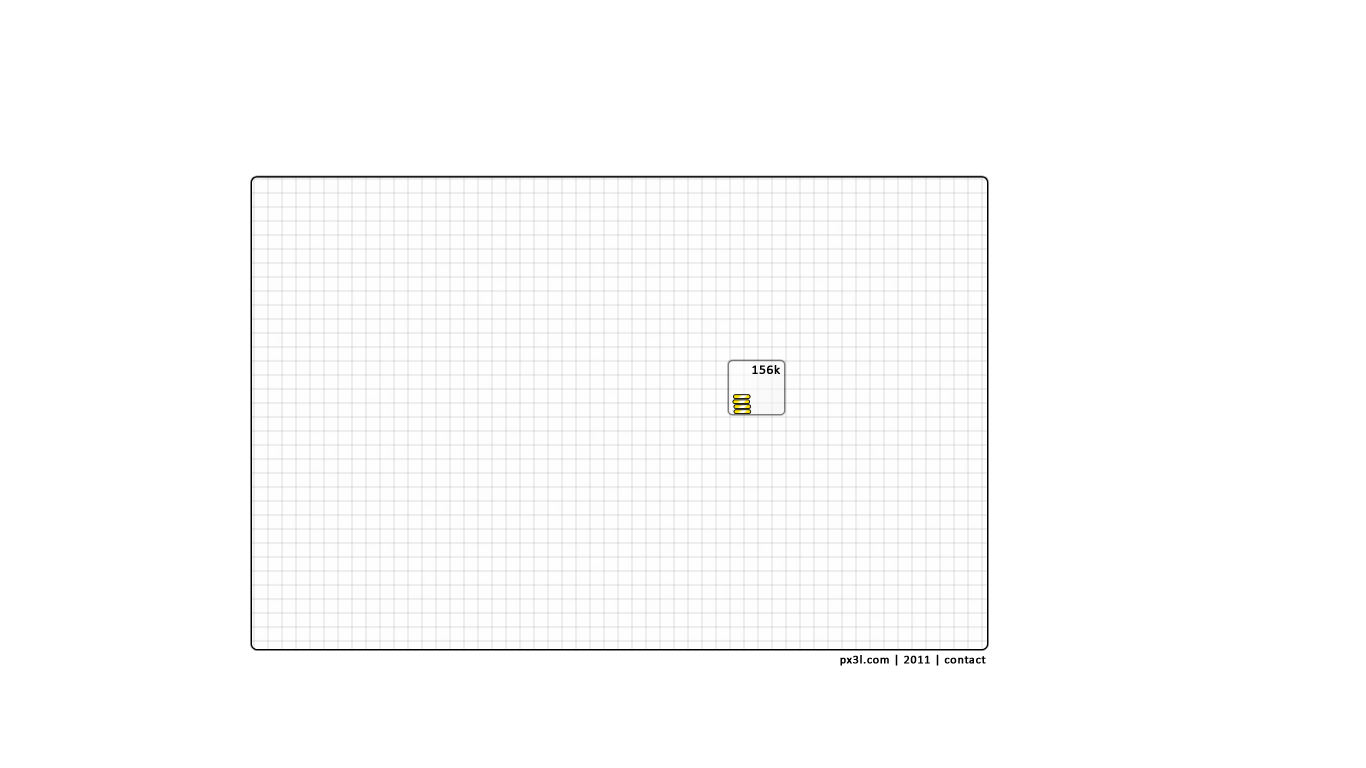
<style>
.page{position:relative;width:1366px;height:768px;background:#ffffff}
.page>*{position:absolute;margin:0}
.t1{font:13px "Calibri";letter-spacing:0.04em;color:#000000;font-weight:bold}
.t2{font:12px "Calibri";letter-spacing:0.04em;color:#000000;font-weight:bold}
</style>
<div class="page">
<p class="t1" style="left:752px;top:365px;width:28px;height:9px">156k</p>
<p class="t2" style="left:840px;top:654px;width:146px;height:12px">px3l.com | 2011 | contact</p>
</div>
